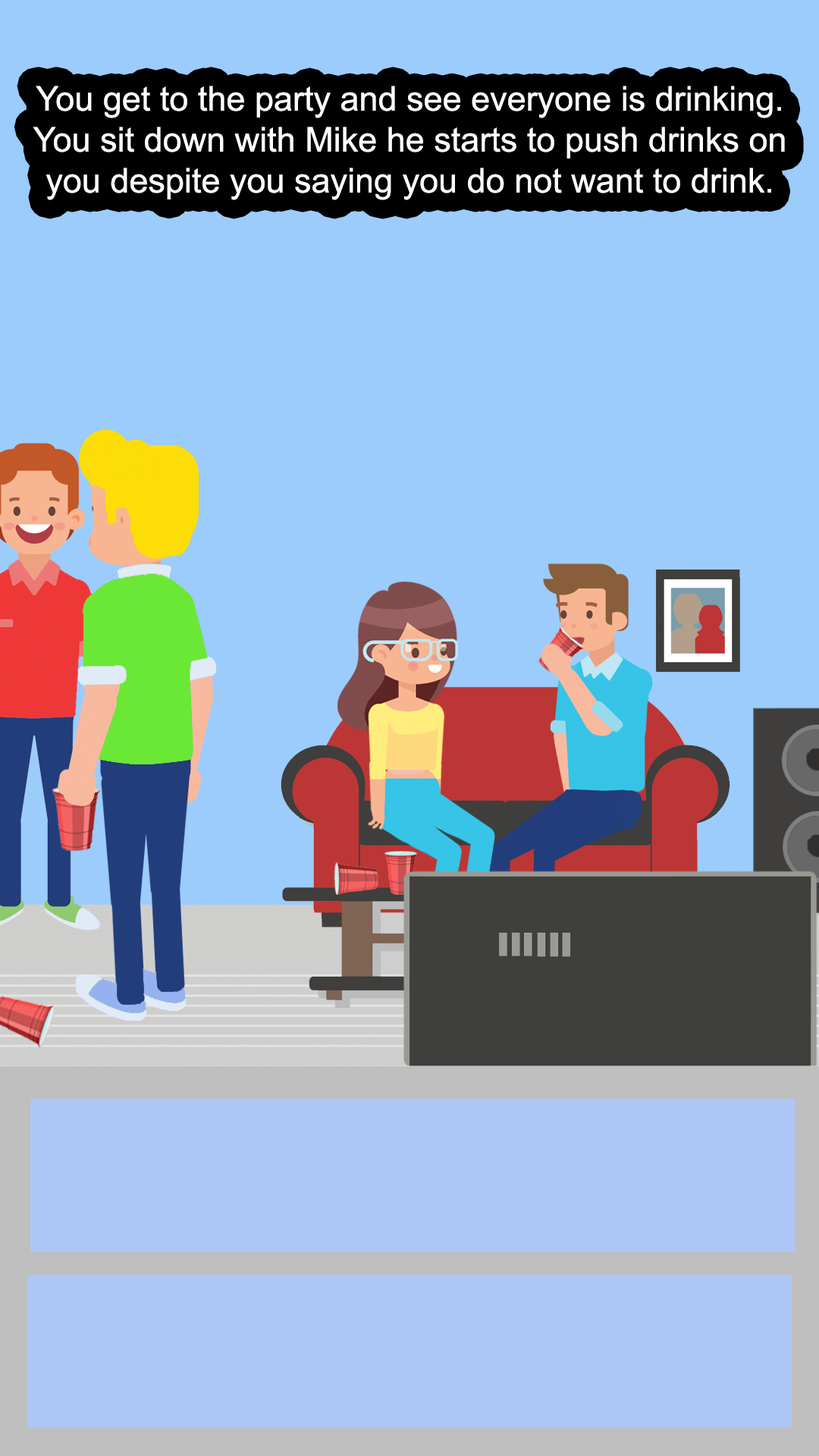
<style>
.page{position:relative;width:819px;height:1456px;background:#9bccfc}
.page>*{position:absolute;margin:0}
.t1{font:34.1px "ArialMT";color:#ffffff}
</style>
<div class="page">
<p class="t1" style="left:33px;top:86px;width:752px;height:114px;text-align:center">You get to the party and see everyone is drinking. You sit down with Mike he starts to push drinks on you despite you saying you do not want to drink.</p>
</div>
